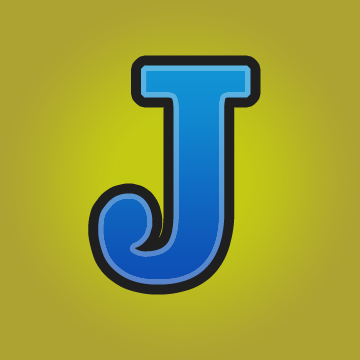
<style>
.page{position:relative;width:360px;height:360px;background:#ada332}
.page>*{position:absolute;margin:0}
.t1{font:285.6px "Clarendon-Bold";font-weight:bold;scale:0.81 1}
</style>
<div class="page">
<p class="t1" style="left:98px;top:65px;width:153px;height:220px">J</p>
</div>
